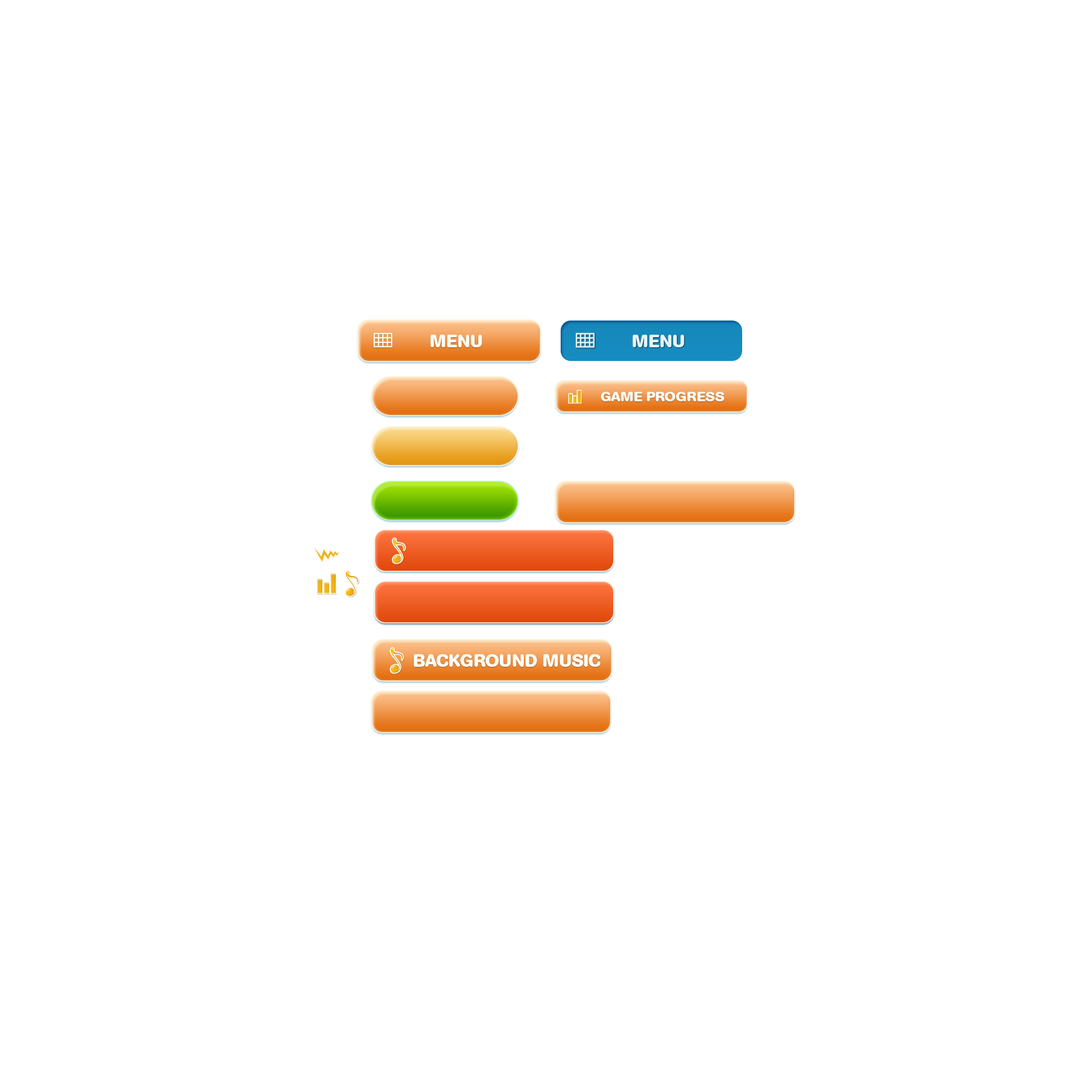
<style>
.page{position:relative;width:1092px;height:1092px;background:#ffffff}
.page>*{position:absolute;margin:0}
.t1{font:17.7px "AGBookRounded-Bold";color:#fdfdf3;text-transform:uppercase}
.t2{font:17.7px "AGBookRounded-Bold";color:#e4f3fa;text-transform:uppercase}
.t3{font:13.2px "AGBookRounded-Bold";color:#fdfdf3;text-transform:uppercase;scale:1.07 1}
</style>
<div class="page">
<p class="t1" style="left:430px;top:335px;width:52px;height:12px">MENU</p>
<p class="t2" style="left:632px;top:335px;width:53px;height:12px">MENU</p>
<p class="t3" style="left:601px;top:392px;width:123px;height:9px">GAME PROGRESS</p>
<p class="t1" style="left:414px;top:654px;width:187px;height:13px">BACKGROUND MUSIC</p>
</div>
